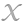
<style>
.page{position:relative;width:24px;height:24px;background:#ffffff}
.page>*{position:absolute;margin:0}
.t1{font:24px "LucidaCalligraphy-Italic";color:#a4a4a4}
</style>
<div class="page">
<p class="t1" style="left:1px;top:4px;width:22px;height:17px">X</p>
</div>
